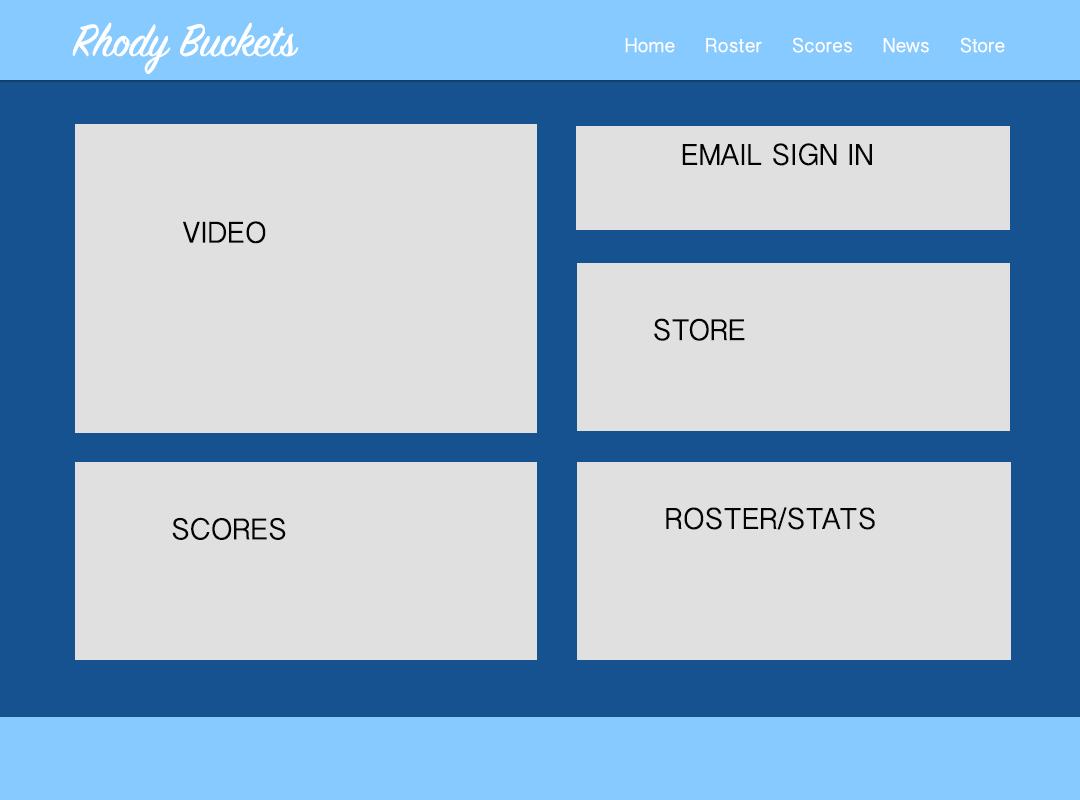
<style>
.page{position:relative;width:1080px;height:800px;background:#e0e0e0}
.page>*{position:absolute;margin:0}
.t1{font:50px "SignPainter-HouseScript";color:#ffffff}
.t2{font:20px "MyanmarSangamMN";color:#ffffff}
.t3{font:30px "MyanmarSangamMN";color:#020303}
</style>
<div class="page">
<p class="t1" style="left:72px;top:22px;width:226px;height:52px">Rhody Buckets</p>
<p class="t2" style="left:625px;top:37px;width:380px;height:16px">Home     Roster     Scores     News     Store</p>
<p class="t3" style="left:682px;top:143px;width:190px;height:23px">EMAIL SIGN IN</p>
<p class="t3" style="left:183px;top:221px;width:83px;height:23px">VIDEO</p>
<p class="t3" style="left:654px;top:318px;width:91px;height:23px">STORE</p>
<p class="t3" style="left:666px;top:507px;width:209px;height:23px">ROSTER/STATS</p>
<p class="t3" style="left:172px;top:517px;width:114px;height:23px">SCORES</p>
</div>
